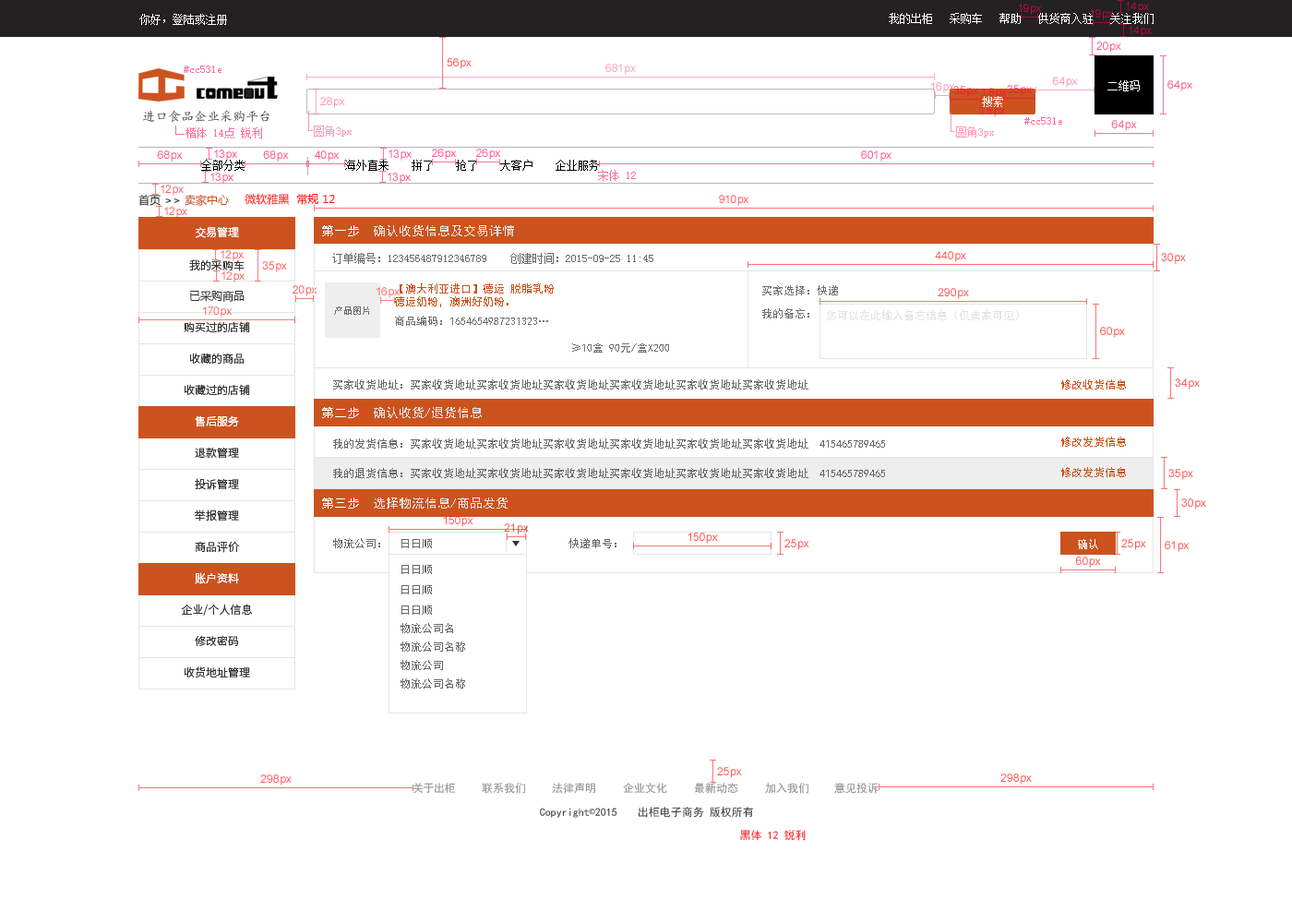
<style>
.page{position:relative;width:1292px;height:923px;background:#ffffff}
.page>*{position:absolute;margin:0}
.t1{font:11.1px "SimSun";color:#ffffff}
.t2{font:11.1px "SimSun";color:#fc6f9a}
.t3{font:12.9px "¿¬Ìå";color:#464343}
.t4{font:11.1px "SimSun";color:#000000}
.t5{font:11.1px "MicrosoftYaHei";color:#cc531e}
.t6{font:11.1px "MicrosoftYaHei";color:#2a2a2a}
.t7{font:11.1px "MicrosoftYaHei";color:#333333}
.t8{font:11.1px "MicrosoftYaHei";color:#ff1111}
.t9{font:11.1px "SourceHanSansCN-Normal";color:#ffffff}
.t10{font:12.9px "SimHei";color:#e4e4e4}
.t11{font:12.9px "SimHei";color:#ffffff}
.t12{font:11.1px "SimSun";color:#696969}
.t13{font:11.1px "SourceHanSansCN-Normal";color:#333333}
.t14{font:11.1px "SimHei";color:#cc531e}
.t15{font:11.1px "SimHei";color:#717171}
.t16{font:9.2px "SimHei";color:#707070}
.t17{font:11.1px "SimHei";color:#707070}
.t18{font:11.1px "SimHei";color:#e4e4e4}
.t19{font:11.1px "SimHei";color:#696969}
.t20{font:11.1px "SourceHanSansCN-Normal";color:#fefefe}
.t21{font:11.1px "SimHei";color:#ffffff}
.t22{font:11.1px "SimHei";color:#959595}
.t23{font:11.1px "SimHei";color:#434343}
.t24{font:11.1px "SimSun";color:#434343}
.t25{font:11.1px "SimHei";color:#ff2222}
</style>
<div class="page">
<p class="t1" style="left:139px;top:14px;width:88px;height:11px">你好，登陆或注册</p>
<p class="t1" style="left:889px;top:13px;width:265px;height:11px">我的出柜   采购车   帮助   供货商入驻   关注我们</p>
<p class="t2" style="left:184px;top:66px;width:37px;height:7px">#cc531e</p>
<p class="t1" style="left:1107px;top:80px;width:33px;height:11px">二维码</p>
<p class="t1" style="left:982px;top:96px;width:21px;height:11px">搜索</p>
<p class="t3" style="left:142px;top:110px;width:127px;height:13px">进口食品企业采购平台</p>
<p class="t2" style="left:1024px;top:117px;width:38px;height:8px">#cc531e</p>
<p class="t4" style="left:201px;top:160px;width:44px;height:11px">全部分类</p>
<p class="t4" style="left:345px;top:160px;width:254px;height:11px">海外直来    拼了    抢了    大客户    企业服务</p>
<p class="t2" style="left:598px;top:170px;width:38px;height:11px">宋体 12</p>
<p class="t5" style="left:138px;top:194px;width:91px;height:12px"><span class="t6">首页 </span><span class="t7">&gt;&gt; </span>卖家中心</p>
<p class="t8" style="left:245px;top:193px;width:90px;height:12px">微软雅黑  常规 12</p>
<p class="t9" style="left:196px;top:226px;width:43px;height:12px">交易管理</p>
<p class="t10" style="left:322px;top:225px;width:192px;height:11px"><span class="t11">第一步  </span>确认收货信息及交易详情</p>
<p class="t12" style="left:332px;top:253px;width:154px;height:11px">订单编号：123456487912346789</p>
<p class="t12" style="left:510px;top:253px;width:143px;height:11px">创建时间：2015-09-25 11:45</p>
<p class="t13" style="left:189px;top:259px;width:56px;height:12px">我的采购车</p>
<p class="t7" style="left:189px;top:291px;width:56px;height:11px">已采购商品</p>
<p class="t14" style="left:394px;top:283px;width:160px;height:24px;text-align:right">【澳大利亚进口】德运 脱脂乳粉<br>德运奶粉，澳洲好奶粉。</p>
<p class="t15" style="left:762px;top:285px;width:76px;height:10px">买家选择：快递</p>
<p class="t16" style="left:334px;top:306px;width:35px;height:9px">产品图片</p>
<p class="t17" style="left:395px;top:316px;width:153px;height:10px">商品编码：1654654987231323…</p>
<p class="t15" style="left:762px;top:308px;width:47px;height:10px">我的备忘：</p>
<p class="t18" style="left:827px;top:310px;width:192px;height:10px">您可以在此输入备忘信息（仅卖家可见）</p>
<p class="t13" style="left:184px;top:321px;width:66px;height:11px">购买过的店铺</p>
<p class="t13" style="left:189px;top:353px;width:56px;height:11px">收藏的商品</p>
<p class="t15" style="left:572px;top:343px;width:97px;height:10px">≥10盒 90元/盒X200</p>
<p class="t13" style="left:184px;top:384px;width:66px;height:11px">收藏过的店铺</p>
<p class="t19" style="left:333px;top:379px;width:475px;height:10px">买家收货地址：买家收货地址买家收货地址买家收货地址买家收货地址买家收货地址买家收货地址</p>
<p class="t14" style="left:1061px;top:379px;width:65px;height:10px">修改收货信息</p>
<p class="t10" style="left:322px;top:407px;width:160px;height:11px"><span class="t11">第二步  </span>确认收货/退货信息</p>
<p class="t20" style="left:195px;top:415px;width:44px;height:12px">售后服务</p>
<p class="t14" style="left:1061px;top:437px;width:65px;height:10px">修改发货信息</p>
<p class="t13" style="left:195px;top:447px;width:44px;height:11px">退款管理</p>
<p class="t19" style="left:333px;top:438px;width:552px;height:11px">我的发货信息：买家收货地址买家收货地址买家收货地址买家收货地址买家收货地址买家收货地址  415465789465</p>
<p class="t19" style="left:333px;top:468px;width:552px;height:10px">我的退货信息：买家收货地址买家收货地址买家收货地址买家收货地址买家收货地址买家收货地址  415465789465</p>
<p class="t14" style="left:1061px;top:467px;width:65px;height:10px">修改发货信息</p>
<p class="t13" style="left:195px;top:478px;width:44px;height:12px">投诉管理</p>
<p class="t10" style="left:322px;top:497px;width:186px;height:12px"><span class="t11">第三步  </span>选择物流信息/商品发货</p>
<p class="t13" style="left:195px;top:509px;width:44px;height:12px">举报管理</p>
<p class="t13" style="left:195px;top:541px;width:44px;height:12px">商品评价</p>
<p class="t19" style="left:333px;top:538px;width:47px;height:10px">物流公司：</p>
<p class="t19" style="left:401px;top:539px;width:31px;height:9px">日日顺</p>
<p class="t19" style="left:569px;top:538px;width:47px;height:10px">快递单号：</p>
<p class="t21" style="left:1078px;top:539px;width:20px;height:10px">确认</p>
<p class="t19" style="left:401px;top:565px;width:31px;height:9px">日日顺</p>
<p class="t20" style="left:195px;top:572px;width:44px;height:12px">账户资料</p>
<p class="t19" style="left:401px;top:585px;width:31px;height:9px">日日顺</p>
<p class="t13" style="left:181px;top:604px;width:71px;height:12px">企业/个人信息</p>
<p class="t19" style="left:401px;top:605px;width:31px;height:10px">日日顺</p>
<p class="t19" style="left:401px;top:623px;width:52px;height:10px">物流公司名</p>
<p class="t13" style="left:195px;top:635px;width:44px;height:11px">修改密码</p>
<p class="t19" style="left:401px;top:641px;width:64px;height:11px">物流公司名称</p>
<p class="t19" style="left:401px;top:660px;width:42px;height:10px">物流公司</p>
<p class="t13" style="left:184px;top:666px;width:66px;height:12px">收货地址管理</p>
<p class="t19" style="left:401px;top:678px;width:64px;height:10px">物流公司名称</p>
<p class="t22" style="left:413px;top:783px;width:43px;height:11px">关于出柜</p>
<p class="t22" style="left:482px;top:783px;width:43px;height:11px">联系我们</p>
<p class="t22" style="left:552px;top:783px;width:43px;height:11px">法律声明</p>
<p class="t22" style="left:623px;top:783px;width:44px;height:11px">企业文化</p>
<p class="t22" style="left:694px;top:783px;width:44px;height:11px">最新动态</p>
<p class="t22" style="left:765px;top:783px;width:43px;height:11px">加入我们</p>
<p class="t22" style="left:834px;top:783px;width:45px;height:11px">意见投诉</p>
<p class="t23" style="left:540px;top:808px;width:77px;height:10px">Copyright<span class="t24">©</span>2015</p>
<p class="t23" style="left:638px;top:807px;width:66px;height:11px">出柜电子商务</p>
<p class="t23" style="left:710px;top:807px;width:43px;height:11px">版权所有</p>
<p class="t25" style="left:739px;top:830px;width:67px;height:11px">黑体 12 锐利</p>
</div>
